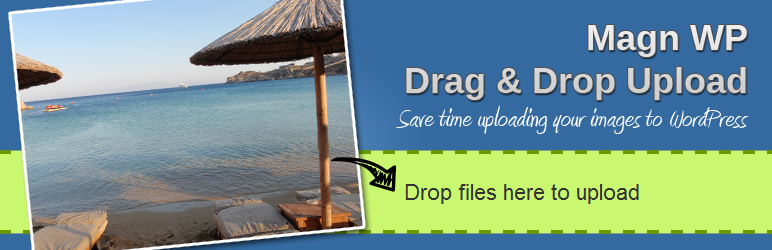
<style>
.page{position:relative;width:772px;height:250px;background:#356aa0}
.page>*{position:absolute;margin:0}
.t1{font:36px "Arimo-Bold";color:#d6d6d6}
.t2{font:31.1px "Amienne";color:#ffffff}
</style>
<div class="page">
<p class="t1" style="left:406px;top:25px;width:341px;height:75px;text-align:right">Magn WP<br>Drag &amp; Drop Upload</p>
<p class="t2" style="left:396px;top:105px;width:352px;height:29px">Save time uploading your images to WordPress</p>
</div>
